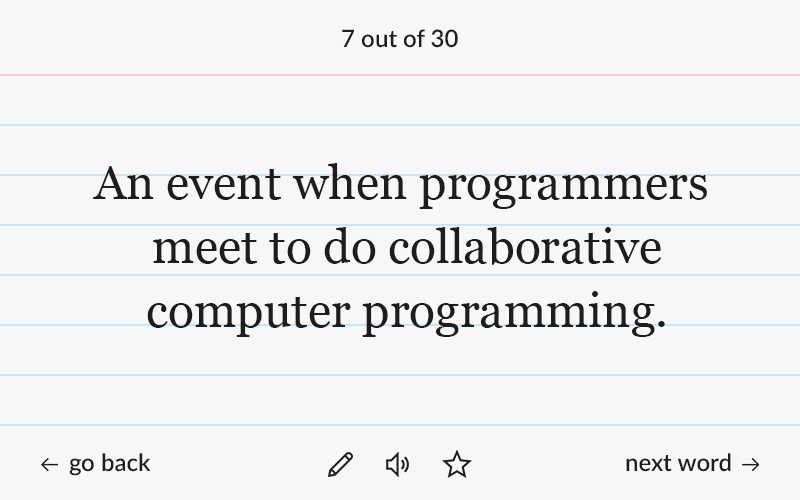
<style>
.page{position:relative;width:800px;height:500px;background:#f7f7f7}
.page>*{position:absolute;margin:0}
.t1{font:24px "Lato-Semibold";color:#1d1d1d}
.t2{font:48px/64px "Georgia";color:#1d1d1d}
</style>
<div class="page">
<p class="t1" style="left:342px;top:29px;width:116px;height:19px">7 out of 30</p>
<p class="t2" style="left:93px;top:163px;width:614px;height:174px;text-align:center">An event when programmers <br>meet to do collaborative<br>computer programming.</p>
<p class="t1" style="left:69px;top:453px;width:82px;height:23px">go back</p>
<p class="t1" style="left:626px;top:453px;width:105px;height:19px">next word</p>
</div>
